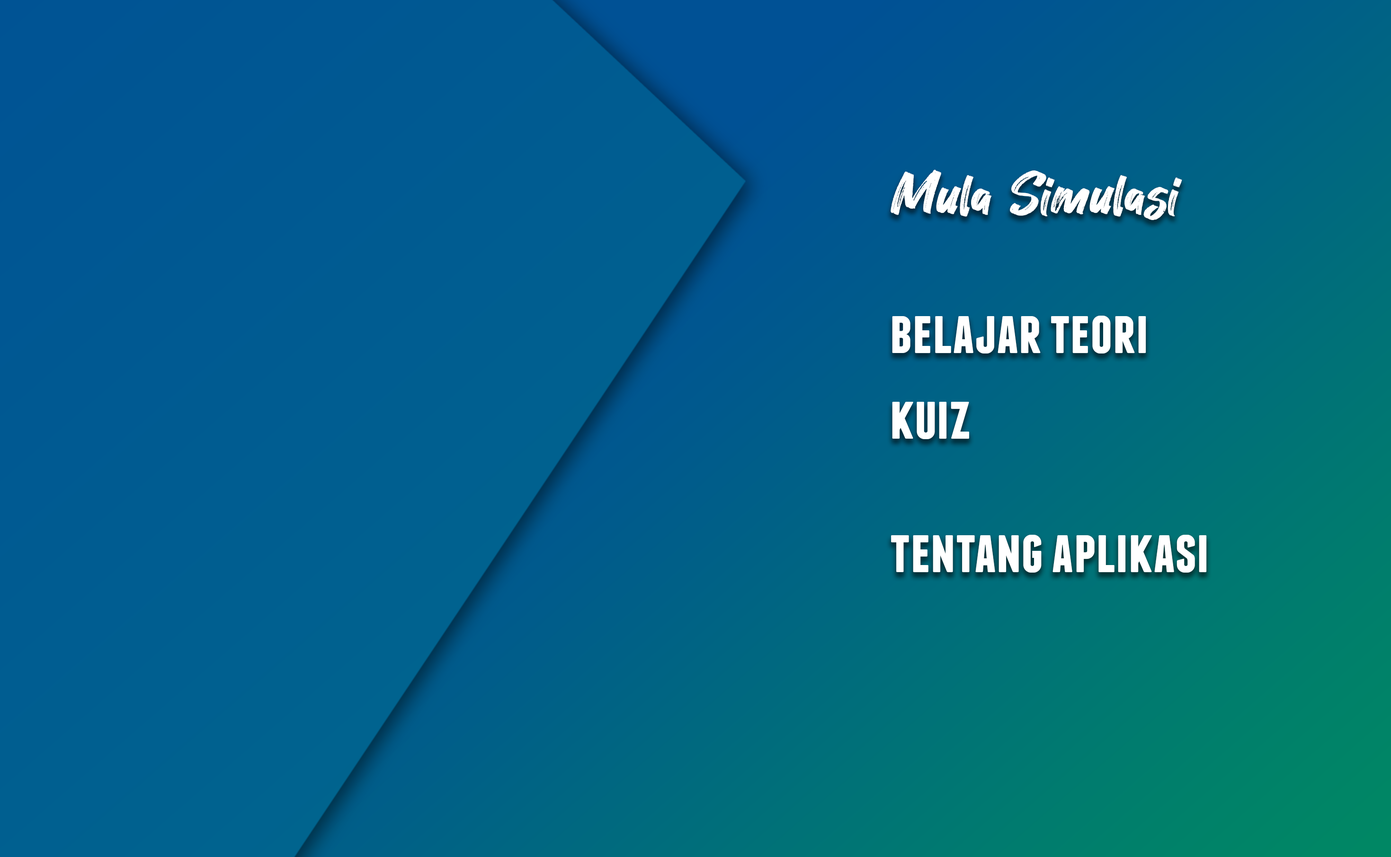
<style>
.page{position:relative;width:1391px;height:857px}
.page>*{position:absolute;margin:0}
.t1{font:61.5px "Hey-August";color:#ffffff}
.t2{font:61.5px "Franchise-Bold";color:#ffffff}
</style>
<div class="page">
<p class="t1" style="left:890px;top:169px;width:292px;height:51px">Mula Simulasi</p>
<p class="t2" style="left:892px;top:316px;width:254px;height:38px">belajar teori</p>
<p class="t2" style="left:892px;top:402px;width:77px;height:37px">kuiz</p>
<p class="t2" style="left:891px;top:535px;width:316px;height:38px">tentang aplikasi</p>
</div>
